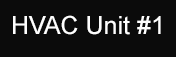
<style>
.page{position:relative;width:176px;height:57px;background:#0b0b0b}
.page>*{position:absolute;margin:0}
.t1{font:25px "ArialMT";color:#ffffff}
</style>
<div class="page">
<p class="t1" style="left:13px;top:15px;width:148px;height:20px">HVAC Unit #1</p>
</div>
